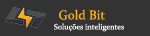
<style>
.page{position:relative;width:150px;height:36px;background:#333333}
.page>*{position:absolute;margin:0}
.t1{font:13px "Constantia";color:#fab016}
.t2{font:7.8px "Constantia";color:#ffffff}
</style>
<div class="page">
<p class="t1" style="left:59px;top:9px;width:46px;height:11px">Gold Bit</p>
<p class="t2" style="left:54px;top:23px;width:70px;height:9px">Soluções inteligentes</p>
</div>
